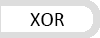
<style>
.page{position:relative;width:100px;height:38px;background:#ffffff}
.page>*{position:absolute;margin:0}
.t1{font:12px "Calibri";color:#000000}
</style>
<div class="page">
<p class="t1" style="left:30px;top:13px;width:34px;height:13px">XOR</p>
</div>
